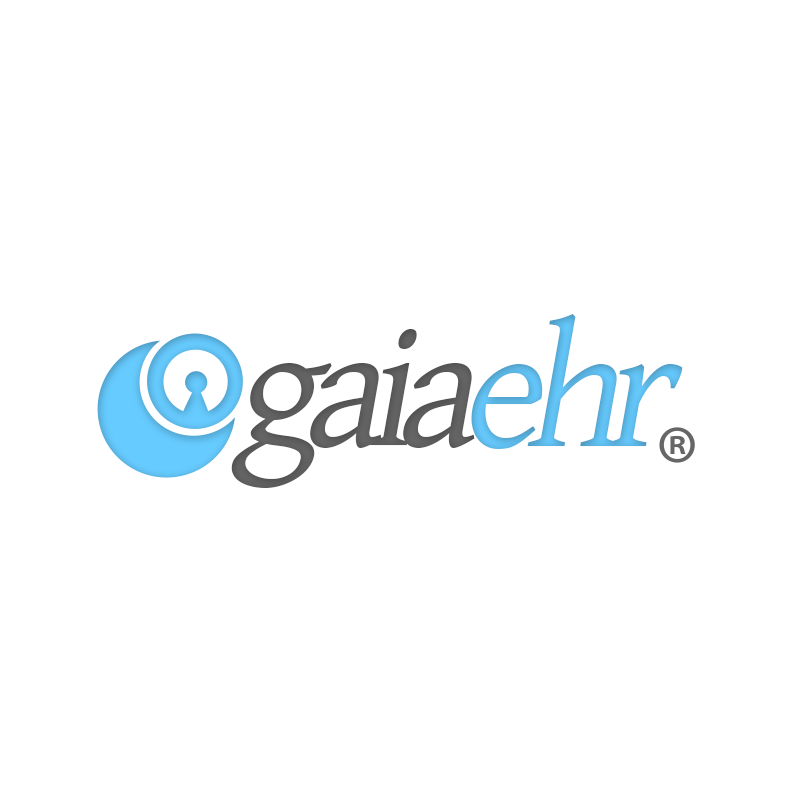
<style>
.page{position:relative;width:800px;height:800px;background:#ffffff}
.page>*{position:absolute;margin:0}
.t1{font:174.5px "GentiumBasic";letter-spacing:-0.1em;color:#5ebaea;font-style:italic}
.t2{font:174.5px "GentiumBasic";letter-spacing:-0.1em;color:#666666;font-style:italic}
</style>
<div class="page">
<p class="t1" style="left:471px;top:314px;width:212px;height:135px">ehr</p>
<p class="t2" style="left:310px;top:329px;width:165px;height:119px">aia</p>
<p class="t2" style="left:231px;top:363px;width:101px;height:125px">g</p>
</div>
